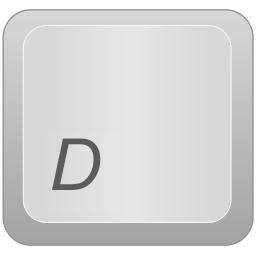
<style>
.page{position:relative;width:256px;height:256px}
.page>*{position:absolute;margin:0}
.t1{font:72px "Arial-ItalicMT";color:#5b5b5b}
</style>
<div class="page">
<p class="t1" style="left:52px;top:138px;width:49px;height:52px">D</p>
</div>
